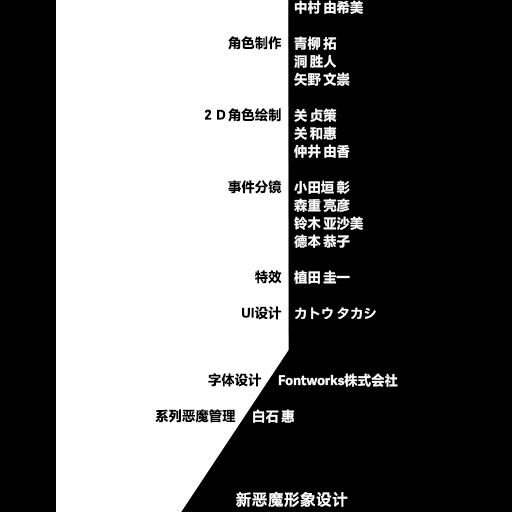
<style>
.page{position:relative;width:512px;height:512px;background:#000000}
.page>*{position:absolute;margin:0}
.t1{font:13.5px/18px "FZLTHProGlobal-Bold";letter-spacing:0.005em;color:#ffffff}
.t2{font:13.5px/18px "FZLTHProGlobal-Bold";letter-spacing:0.005em;color:#000000}
.t3{font:13.5px "FZLTHProGlobal-Bold";letter-spacing:0.005em;color:#000000}
.t4{font:13.5px "FZLTHProGlobal-Bold";letter-spacing:0.005em;color:#ffffff}
.t5{font:16.2px "FZLTHProGlobal-Demibold";letter-spacing:0.005em;color:#ffffff}
</style>
<div class="page">
<p class="t1" style="left:294px;top:0px;width:82px;height:320px">中村 由希美<br><br>青柳 拓<br>洞 胜人<br>矢野 文崇<br><br>关 贞策<br>关 和惠<br>仲井 由香<br><br>小田垣 彰<br>森重 亮彦<br>铃木 亚沙美<br>德本 恭子<br><br>植田 圭一<br><br>カトウ タカシ</p>
<p class="t2" style="left:204px;top:36px;width:78px;height:284px;text-align:right">角色制作<br><br><br><br>２Ｄ角色绘制<br><br><br><br>事件分镜<br><br><br><br><br>特效<br><br>UI设计</p>
<p class="t3" style="left:208px;top:373px;width:54px;height:14px">字体设计</p>
<p class="t4" style="left:278px;top:373px;width:120px;height:14px">Fontworks株式会社</p>
<p class="t3" style="left:155px;top:409px;width:81px;height:14px">系列恶魔管理</p>
<p class="t4" style="left:253px;top:409px;width:42px;height:14px">白石 惠</p>
<p class="t5" style="left:236px;top:491px;width:112px;height:16px">新恶魔形象设计</p>
</div>
